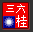
<style>
.page{position:relative;width:33px;height:32px;background:#f20000}
.page>*{position:absolute;margin:0}
.t1{font:10.4px "SimSun";color:#ffffff}
.t2{font:11.7px "SimSun";color:#ffffff}
</style>
<div class="page">
<p class="t1" style="left:6px;top:4px;width:19px;height:9px">三六</p>
<p class="t2" style="left:16px;top:15px;width:11px;height:12px">桂</p>
</div>
